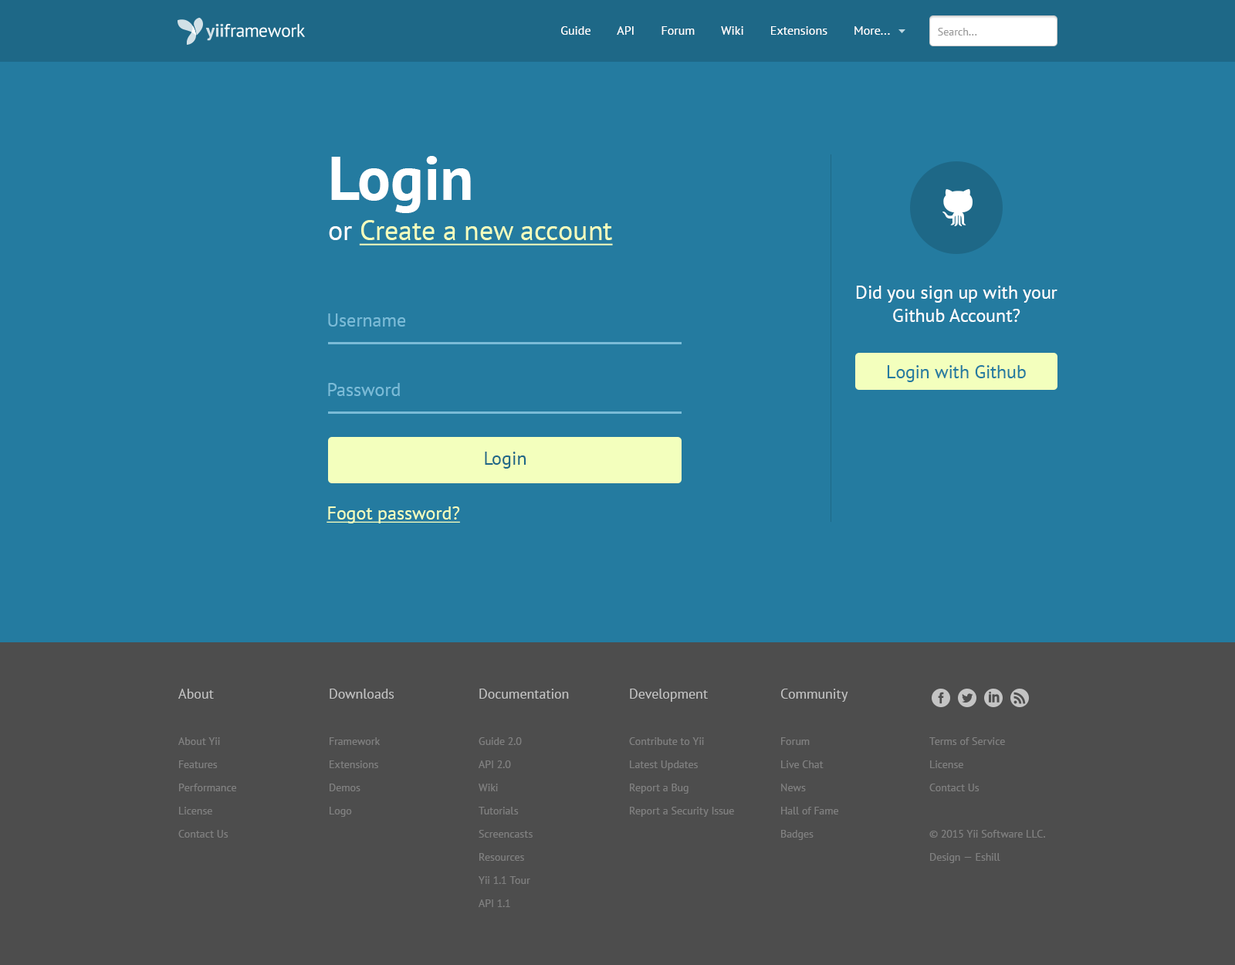
<style>
.page{position:relative;width:1235px;height:965px;background:#247ba0}
.page>*{position:absolute;margin:0}
.t1{font:12.4px "PTSans-Regular";color:#ffffff}
.t2{font:10.8px "PTSans-Regular";color:#999999}
.t3{font:61.8px "PTSans-Bold";color:#ffffff}
.t4{font:27.8px "PTSans-Regular";color:#f3ffbd;text-decoration:underline}
.t5{font:27.8px "PTSans-Regular";color:#ffffff}
.t6{font:18.5px/23.2px "PTSans-Regular";color:#ffffff}
.t7{font:18.5px "PTSans-Regular";color:#7abbd7}
.t8{font:18.5px "PTSans-Regular";color:#247ba0}
.t9{font:18.5px "PTSans-Regular";color:#1e6887}
.t10{font:18.5px "PTSans-Regular";color:#f3ffbd;text-decoration:underline}
.t11{font:10.8px/23.2px "PTSans-Regular";color:#808080}
.t12{font:13.9px/23.2px "PTSans-Regular";color:#c4c4c4}
</style>
<div class="page">
<p class="t1" style="left:561px;top:26px;width:329px;height:9px">Guide        API        Forum        Wiki        Extensions        More...</p>
<p class="t2" style="left:938px;top:28px;width:40px;height:8px">Search...</p>
<p class="t3" style="left:331px;top:156px;width:140px;height:57px">Login</p>
<p class="t4" style="left:329px;top:220px;width:284px;height:26px"><span class="t5">or </span>Create a new account</p>
<p class="t6" style="left:856px;top:286px;width:202px;height:36px;text-align:center">Did you sign up with your Github Account?</p>
<p class="t7" style="left:328px;top:313px;width:78px;height:14px">Username</p>
<p class="t8" style="left:887px;top:365px;width:139px;height:17px">Login with Github</p>
<p class="t7" style="left:328px;top:383px;width:72px;height:13px">Password</p>
<p class="t9" style="left:485px;top:452px;width:42px;height:17px">Login</p>
<p class="t10" style="left:327px;top:507px;width:133px;height:17px">Fogot password?</p>
<p class="t11" style="left:178px;top:689px;width:58px;height:149px"><span class="t12">About<br></span><br>About Yii<br>Features<br>Performance<br>License<br>Contact Us</p>
<p class="t11" style="left:330px;top:689px;width:65px;height:128px"><span class="t12">Downloads<br></span><br>Framework<br>Extensions<br>Demos<br>Logo</p>
<p class="t11" style="left:479px;top:689px;width:90px;height:218px"><span class="t12">Documentation<br></span><br>Guide 2.0<br>API 2.0<br>Wiki<br>Tutorials<br>Screencasts<br>Resources<br>Yii 1.1 Tour<br>API 1.1</p>
<p class="t11" style="left:629px;top:689px;width:105px;height:128px"><span class="t12">Development<br></span><br>Contribute to Yii<br>Latest Updates<br>Report a Bug<br>Report a Security Issue</p>
<p class="t11" style="left:781px;top:689px;width:68px;height:151px"><span class="t12">Community<br></span><br>Forum<br>Live Chat<br>News<br>Hall of Fame<br>Badges</p>
<p class="t11" style="left:930px;top:737px;width:115px;height:126px">Terms of Service<br>License<br>Contact Us<br><br>© 2015 Yii Software LLC. Design — Eshill</p>
</div>
